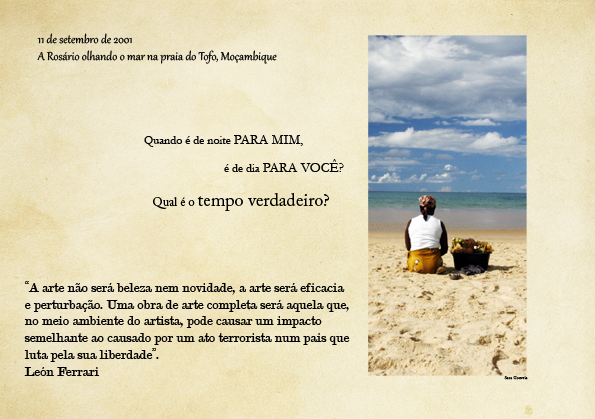
<style>
.page{position:relative;width:595px;height:419px}
.page>*{position:absolute;margin:0}
.t1{font:14px "Gabriola";color:#000000}
.t2{font:12px "Garamond";color:#000000}
.t3{font:14px "Garamond";color:#000000}
.t4{font:12px "ACaslonPro-Regular";color:#000000}
.t5{font:18px "ACaslonPro-Regular";color:#000000}
.t6{font:14px "Modern-Regular";color:#000000}
.t7{font:6px "DaunPenh";color:#000000}
</style>
<div class="page">
<p class="t1" style="left:37px;top:33px;width:240px;height:31px">11 de setembro de 2001<br>A Rosário olhando o mar na praia do Tofo, Moçambique</p>
<p class="t2" style="left:144px;top:135px;width:200px;height:76px">Quando é de noite <span class="t3">PARA MIM,<br> <br>                                </span>é de dia <span class="t3">PARA VOCÊ?<br><br> </span><span class="t4">Qual é o </span><span class="t5">tempo verdadeiro?</span></p>
<p class="t6" style="left:24px;top:281px;width:326px;height:95px">“A arte não será beleza nem novidade, a arte será eficacia <br>e perturbação. Uma obra de arte completa será aquela que, <br>no meio ambiente do artista, pode causar um impacto <br>semelhante ao causado por um ato terrorista num pais que <br>luta pela sua liberdade”.<br>León Ferrari</p>
<p class="t7" style="left:504px;top:376px;width:24px;height:4px">Sara Gouveia</p>
</div>
